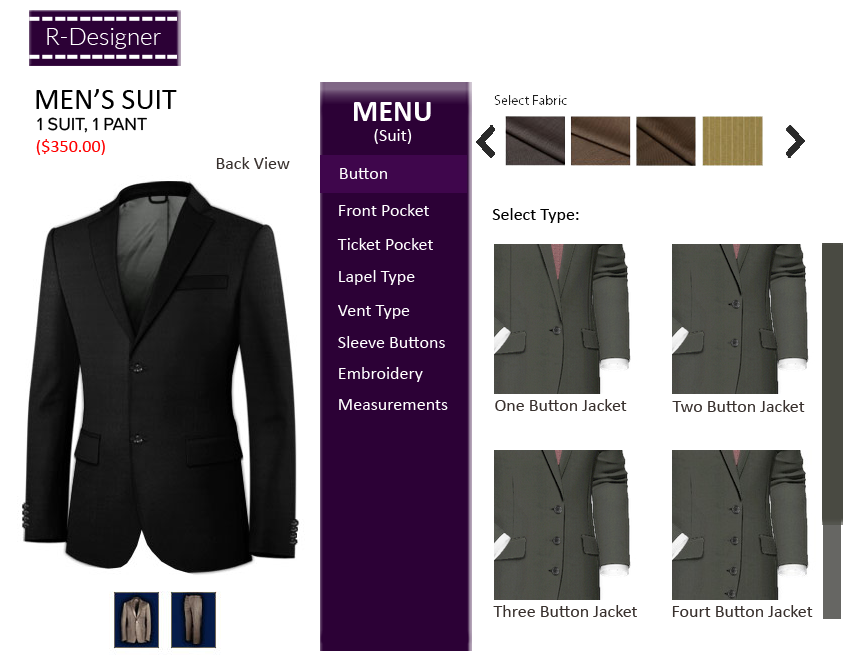
<style>
.page{position:relative;width:853px;height:660px;background:#ffffff}
.page>*{position:absolute;margin:0}
.t1{font:24px "Lato-Light";color:#ffffff}
.t2{font:30px "Calibri-Bold";color:#ffffff}
.t3{font:18px "ProximaNova-Regular";color:#000000}
.t4{font:18px "Calibri";color:#ffffff}
.t5{font:18px "Calibri";color:#ff0000}
.t6{font:18px "Calibri";color:#39312e}
.t7{font:18px "Calibri";color:#000000}
</style>
<div class="page">
<p class="t1" style="left:47px;top:28px;width:114px;height:21px">R-Designer</p>
<p class="t2" style="left:354px;top:102px;width:77px;height:19px">MENU</p>
<p class="t3" style="left:37px;top:117px;width:110px;height:16px">1 SUIT, 1 PANT</p>
<p class="t4" style="left:374px;top:129px;width:38px;height:15px">(Suit)</p>
<p class="t5" style="left:36px;top:139px;width:69px;height:16px">($350.00)</p>
<p class="t6" style="left:216px;top:157px;width:74px;height:12px">Back View</p>
<p class="t4" style="left:340px;top:168px;width:47px;height:11px">Button</p>
<p class="t4" style="left:339px;top:204px;width:90px;height:12px">Front Pocket</p>
<p class="t7" style="left:492px;top:208px;width:87px;height:15px">Select Type:</p>
<p class="t4" style="left:337px;top:238px;width:96px;height:12px">Ticket Pocket</p>
<p class="t4" style="left:339px;top:270px;width:76px;height:15px">Lapel Type</p>
<p class="t4" style="left:338px;top:305px;width:72px;height:14px">Vent Type</p>
<p class="t4" style="left:338px;top:336px;width:107px;height:12px">Sleeve Buttons</p>
<p class="t4" style="left:339px;top:367px;width:84px;height:15px">Embroidery</p>
<p class="t4" style="left:339px;top:399px;width:109px;height:11px">Measurements</p>
<p class="t6" style="left:495px;top:399px;width:132px;height:12px">One Button Jacket</p>
<p class="t6" style="left:672px;top:400px;width:133px;height:12px">Two Button Jacket</p>
<p class="t6" style="left:493px;top:605px;width:144px;height:12px">Three Button Jacket</p>
<p class="t6" style="left:672px;top:605px;width:141px;height:12px">Fourt Button Jacket</p>
</div>
